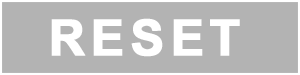
<style>
.page{position:relative;width:300px;height:75px;background:#b3b3b3}
.page>*{position:absolute;margin:0}
.t1{font:50px "Arial-BoldMT";letter-spacing:0.1em;color:#ffffff;text-transform:uppercase;font-weight:bold}
</style>
<div class="page">
<p class="t1" style="left:51px;top:18px;width:189px;height:39px">reset</p>
</div>
